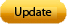
<style>
.page{position:relative;width:67px;height:24px}
.page>*{position:absolute;margin:0}
.t1{font:12px "MyriadPro-Regular";color:#000000}
</style>
<div class="page">
<p class="t1" style="left:15px;top:7px;width:37px;height:11px">Update</p>
</div>
